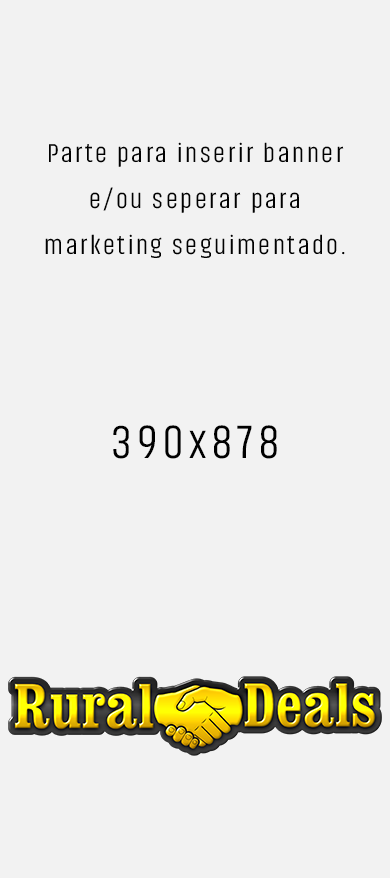
<style>
.page{position:relative;width:390px;height:878px;background:#f2f2f2}
.page>*{position:absolute;margin:0}
.t1{font:26.6px/46px "Akhand-Semilight";letter-spacing:0.1em;color:#000000}
.t2{font:48px "Akhand-Semilight";letter-spacing:0.1em;color:#000000}
</style>
<div class="page">
<p class="t1" style="left:45px;top:142px;width:300px;height:116px;text-align:center">Parte para inserir banner e/ou seperar para marketing seguimentado.</p>
<p class="t2" style="left:113px;top:425px;width:164px;height:34px">390x878</p>
</div>
